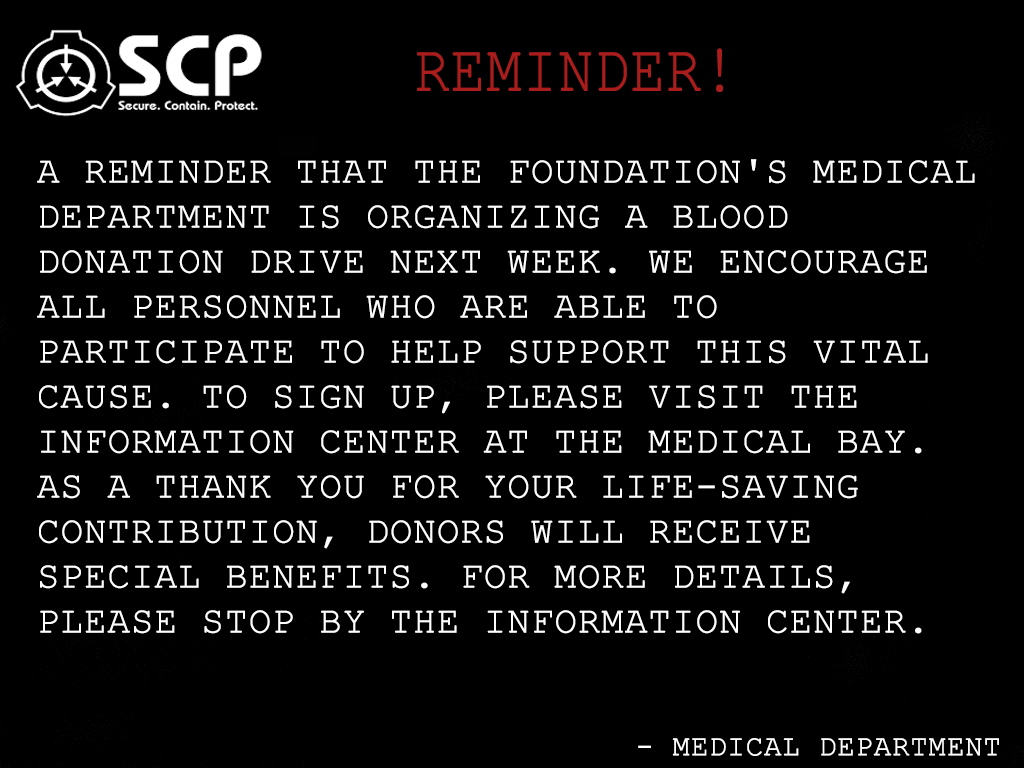
<style>
.page{position:relative;width:1024px;height:768px;background:#000000}
.page>*{position:absolute;margin:0}
.t1{font:66.7px "CourierNewPSMT";color:#aa1d1d;text-transform:uppercase;font-weight:bold;scale:0.86 1}
.t2{font:37.5px "CourierNewPSMT";color:#ffffff;text-transform:uppercase;font-weight:bold}
.t3{font:29.2px "CourierNewPSMT";color:#ffffff;text-transform:uppercase;font-weight:bold}
</style>
<div class="page">
<p class="t1" style="left:417px;top:48px;width:306px;height:44px">Reminder!</p>
<p class="t2" style="left:37px;top:159px;width:938px;height:475px">A reminder that the Foundation's Medical Department is organizing a blood donation drive next week. We encourage all personnel who are able to participate to help support this vital cause. To sign up, please visit the Information Center at the Medical bay. As a thank you for your life-saving contribution, donors will receive special benefits. For more details, please stop by the Information Center.</p>
<p class="t3" style="left:638px;top:738px;width:361px;height:18px">- Medical department</p>
</div>
